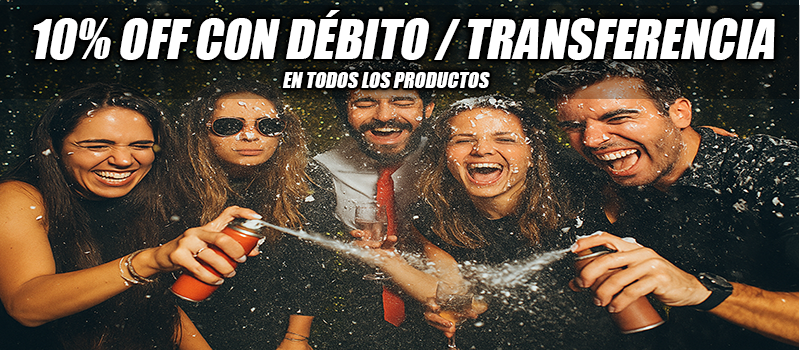
<style>
.page{position:relative;width:800px;height:350px}
.page>*{position:absolute;margin:0}
.t1{font:50px "Impact";color:#ffffff;font-style:italic}
.t2{font:20px "Impact";color:#ffffff;font-style:italic}
</style>
<div class="page">
<p class="t1" style="left:33px;top:10px;width:742px;height:50px">10% OFF CON DÉBITO / TRANSFERENCIA</p>
<p class="t2" style="left:282px;top:72px;width:208px;height:16px">EN TODOS LOS PRODUCTOS</p>
</div>
